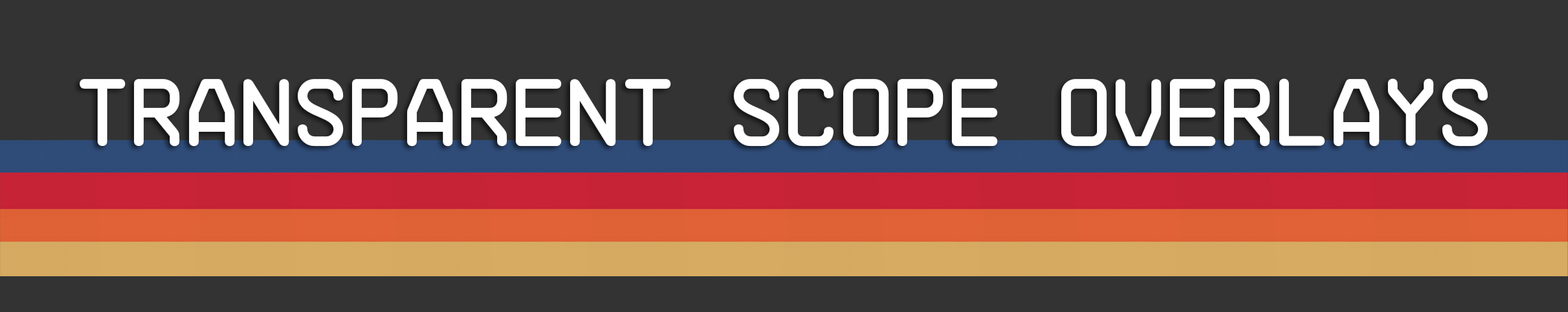
<style>
.page{position:relative;width:1568px;height:312px;background:#333333}
.page>*{position:absolute;margin:0}
.t1{font:95.3px "NB-Architekt";color:#ffffff}
</style>
<div class="page">
<p class="t1" style="left:80px;top:78px;width:1408px;height:69px">Transparent Scope Overlays</p>
</div>
